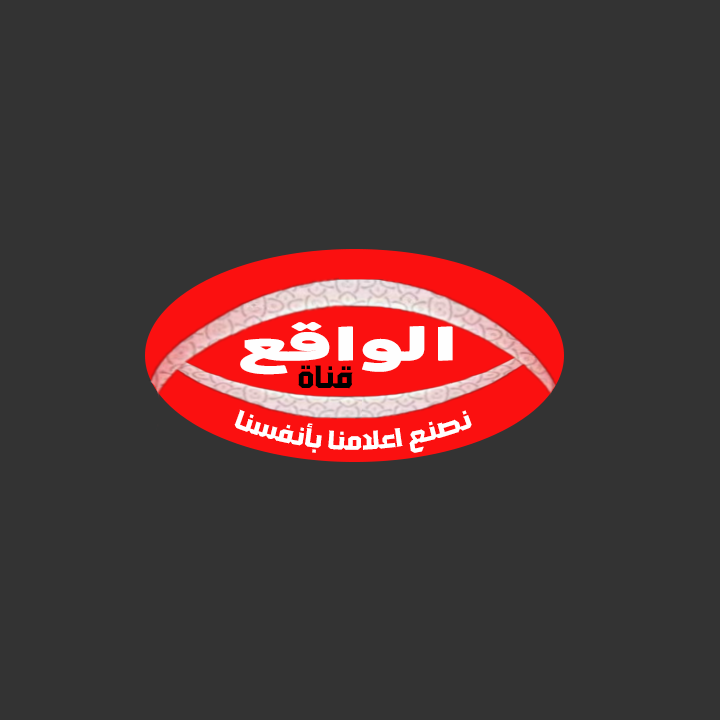
<style>
.page{position:relative;width:720px;height:720px;background:#333333}
.page>*{position:absolute;margin:0}
.t1{font:43.4px "HONORSansArabicUI-H";color:#fefefe;font-weight:bold;scale:1.88 1}
.t2{font:33.5px "DGModal3at";color:#000000}
.t3{font:27.2px "DGModal3at";color:#ffffff}
</style>
<div class="page">
<p class="t1" style="left:240px;top:322px;width:213px;height:53px">الواقع</p>
<p class="t2" style="left:298px;top:365px;width:55px;height:24px">قناة</p>
<p class="t3" style="left:234px;top:409px;width:238px;height:44px">نصنع اعلامنا بأنفسنا</p>
</div>
